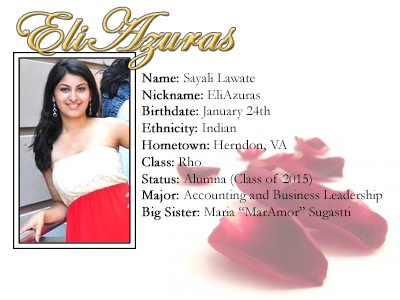
<style>
.page{position:relative;width:400px;height:300px;background:#ffffff}
.page>*{position:absolute;margin:0}
.t1{font:60px "EdwardianScriptITC";font-weight:bold}
.t2{font:14px "Garamond";color:#000000}
.t3{font:14px "Garamond";color:#000000;font-weight:bold}
</style>
<div class="page">
<p class="t1" style="left:17px;top:7px;width:218px;height:63px">EliAzuras</p>
<p class="t2" style="left:141px;top:72px;width:242px;height:148px"><span class="t3">Name: </span>Sayali Lawate<br><span class="t3">Nickname:</span> EliAzuras<br><span class="t3">Birthdate:</span> January 24th<br><span class="t3">Ethnicity:</span> Indian<br><span class="t3">Hometown:</span> Herndon, VA<br><span class="t3">Class:</span> Rho<br><span class="t3">Status:</span> Alumna (Class of 2015)<br><span class="t3">Major:</span> Accounting and Business Leadership<br><span class="t3">Big Sister: </span>Maria “MarAmor” Sugastti</p>
</div>
